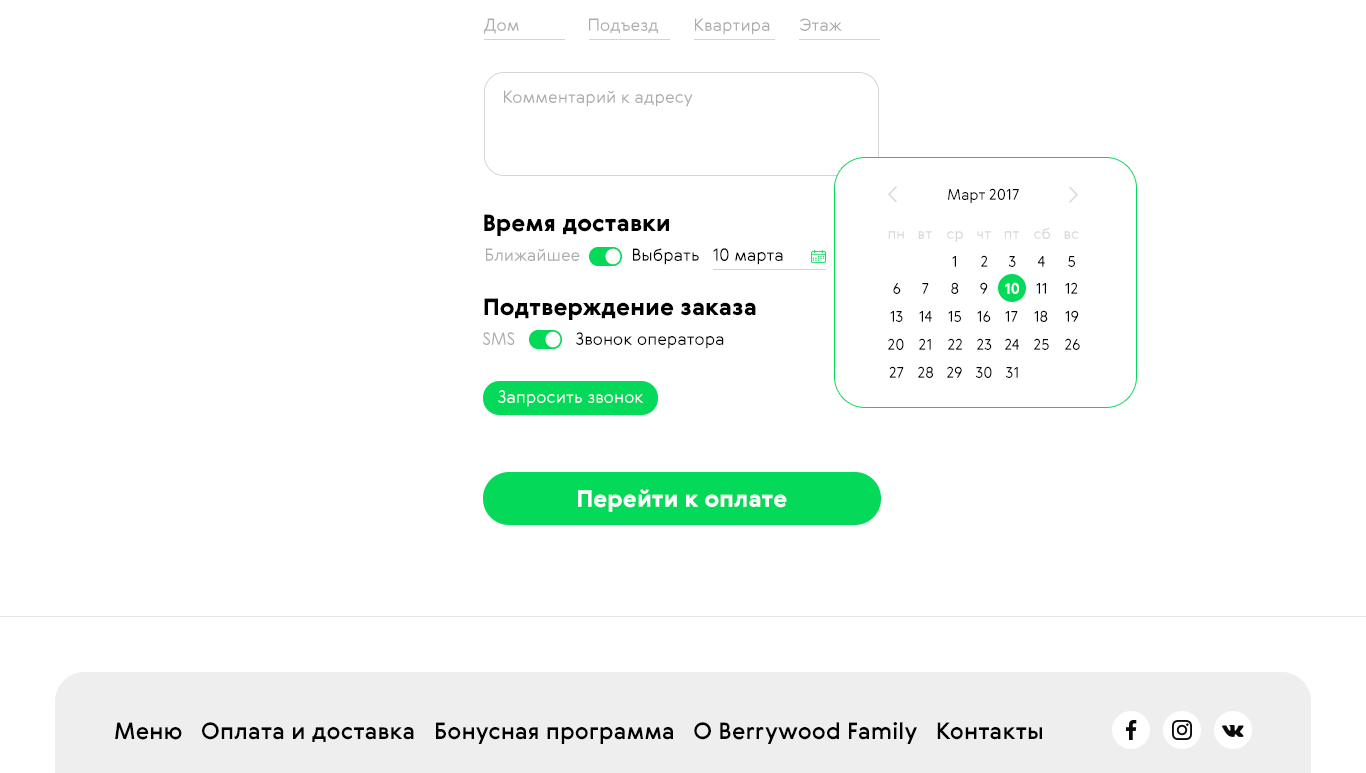
<style>
.page{position:relative;width:1366px;height:773px;background:#ffffff}
.page>*{position:absolute;margin:0}
.t1{font:17px "Gerbera-Light";color:#acacac}
.t2{font:15px "Gerbera-Light";color:#000000}
.t3{font:23px "Gerbera-Black";color:#000000}
.t4{font:15px "Gerbera-Light";color:#d6d6d6}
.t5{font:17px "Gerbera-Light";color:#000000}
.t6{font:15px "Gerbera-Bold";color:#ffffff}
.t7{font:17px "Gerbera-Light";color:#ffffff}
.t8{font:23px "Gerbera-Black";color:#ffffff}
.t9{font:23px "Gerbera-Medium";color:#000000}
</style>
<div class="page">
<p class="t1" style="left:484px;top:18px;width:35px;height:16px">Дом</p>
<p class="t1" style="left:589px;top:18px;width:69px;height:15px">Подъезд</p>
<p class="t1" style="left:695px;top:18px;width:75px;height:17px">Квартира</p>
<p class="t1" style="left:800px;top:18px;width:42px;height:13px">Этаж</p>
<p class="t1" style="left:504px;top:90px;width:189px;height:17px">Комментарий к адресу</p>
<p class="t2" style="left:948px;top:188px;width:71px;height:15px">Март 2017</p>
<p class="t3" style="left:484px;top:214px;width:185px;height:22px">Время доставки</p>
<p class="t4" style="left:888px;top:231px;width:16px;height:8px">пн</p>
<p class="t4" style="left:918px;top:231px;width:14px;height:8px">вт</p>
<p class="t4" style="left:947px;top:231px;width:16px;height:11px">ср</p>
<p class="t4" style="left:977px;top:231px;width:14px;height:8px">чт</p>
<p class="t4" style="left:1004px;top:231px;width:15px;height:8px">пт</p>
<p class="t4" style="left:1034px;top:227px;width:16px;height:12px">сб</p>
<p class="t4" style="left:1064px;top:231px;width:15px;height:8px">вс</p>
<p class="t1" style="left:486px;top:248px;width:94px;height:13px">Ближайшее</p>
<p class="t5" style="left:633px;top:248px;width:66px;height:17px">Выбрать</p>
<p class="t5" style="left:713px;top:248px;width:70px;height:17px">10 марта</p>
<p class="t2" style="left:952px;top:256px;width:4px;height:11px">1</p>
<p class="t2" style="left:981px;top:255px;width:7px;height:12px">2</p>
<p class="t2" style="left:1009px;top:256px;width:7px;height:11px">3</p>
<p class="t2" style="left:1038px;top:256px;width:7px;height:11px">4</p>
<p class="t2" style="left:1068px;top:256px;width:7px;height:11px">5</p>
<p class="t2" style="left:893px;top:283px;width:8px;height:11px">6</p>
<p class="t2" style="left:922px;top:283px;width:7px;height:11px">7</p>
<p class="t2" style="left:951px;top:282px;width:8px;height:12px">8</p>
<p class="t2" style="left:980px;top:282px;width:8px;height:12px">9</p>
<p class="t6" style="left:1005px;top:282px;width:14px;height:12px">10</p>
<p class="t2" style="left:1036px;top:283px;width:10px;height:11px">11</p>
<p class="t2" style="left:1065px;top:282px;width:13px;height:12px">12</p>
<p class="t3" style="left:484px;top:298px;width:272px;height:22px">Подтверждение заказа</p>
<p class="t2" style="left:890px;top:311px;width:13px;height:11px">13</p>
<p class="t2" style="left:919px;top:311px;width:13px;height:11px">14</p>
<p class="t2" style="left:948px;top:311px;width:13px;height:11px">15</p>
<p class="t2" style="left:977px;top:311px;width:14px;height:11px">16</p>
<p class="t2" style="left:1005px;top:311px;width:13px;height:11px">17</p>
<p class="t2" style="left:1034px;top:310px;width:14px;height:12px">18</p>
<p class="t2" style="left:1065px;top:310px;width:14px;height:12px">19</p>
<p class="t1" style="left:483px;top:332px;width:32px;height:13px">SMS</p>
<p class="t5" style="left:576px;top:332px;width:148px;height:17px">Звонок оператора</p>
<p class="t2" style="left:888px;top:338px;width:16px;height:12px">20</p>
<p class="t2" style="left:919px;top:338px;width:12px;height:12px">21</p>
<p class="t2" style="left:948px;top:338px;width:14px;height:12px">22</p>
<p class="t2" style="left:977px;top:338px;width:15px;height:12px">23</p>
<p class="t2" style="left:1005px;top:338px;width:14px;height:12px">24</p>
<p class="t2" style="left:1034px;top:338px;width:15px;height:12px">25</p>
<p class="t2" style="left:1065px;top:338px;width:15px;height:12px">26</p>
<p class="t2" style="left:889px;top:366px;width:15px;height:12px">27</p>
<p class="t2" style="left:918px;top:366px;width:15px;height:12px">28</p>
<p class="t2" style="left:947px;top:366px;width:15px;height:12px">29</p>
<p class="t2" style="left:976px;top:366px;width:16px;height:12px">30</p>
<p class="t2" style="left:1006px;top:367px;width:12px;height:11px">31</p>
<p class="t7" style="left:498px;top:390px;width:146px;height:17px">Запросить звонок</p>
<p class="t8" style="left:578px;top:489px;width:209px;height:23px">Перейти к оплате</p>
<p class="t9" style="left:115px;top:722px;width:927px;height:22px">Меню   Оплата и доставка   Бонусная программа   О Berrywood Family   Контакты</p>
</div>
